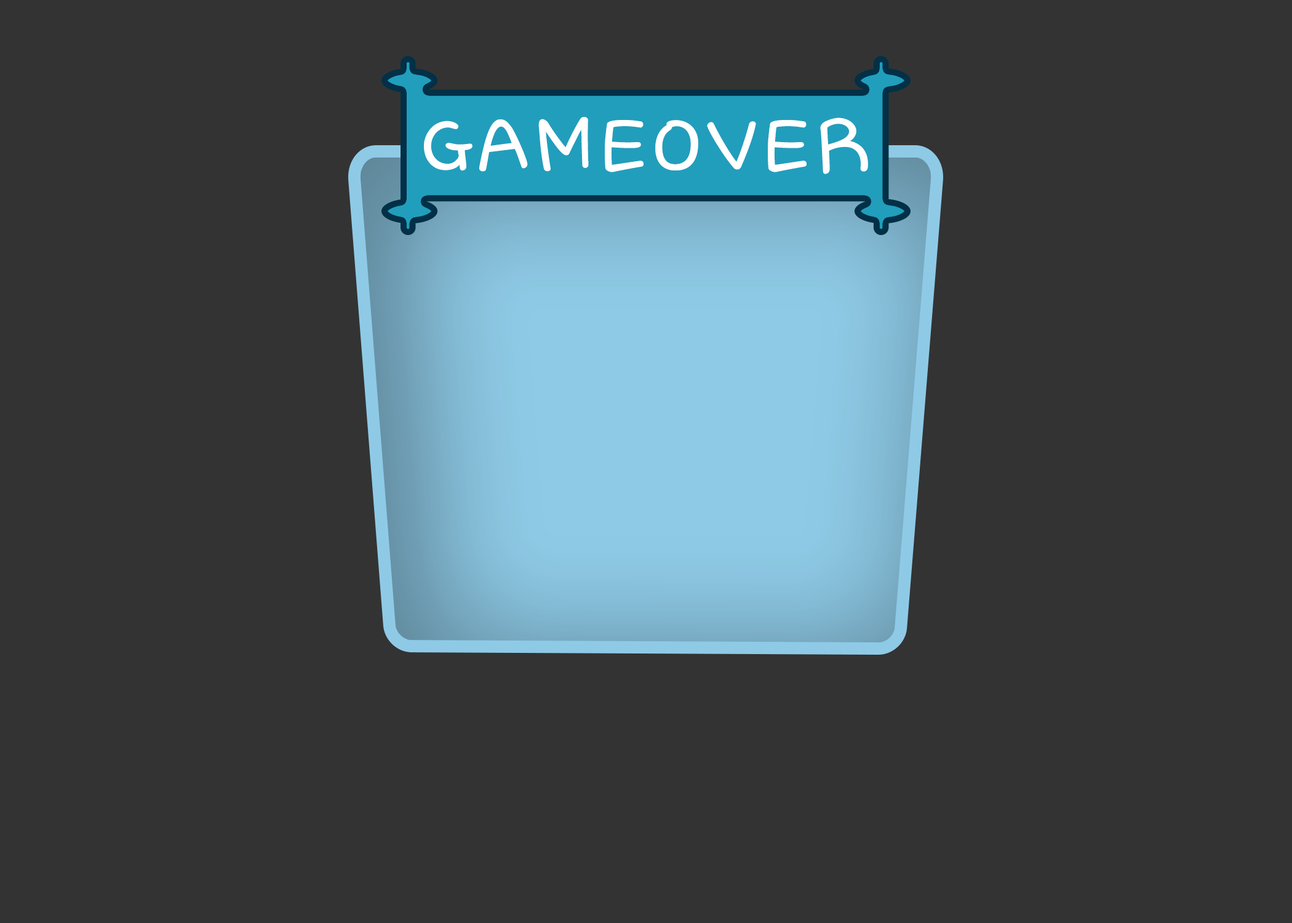
<style>
.page{position:relative;width:1292px;height:923px;background:#333333}
.page>*{position:absolute;margin:0}
.t1{font:76.9px "Chococooky";letter-spacing:0.06em;color:#ffffff;scale:1.13 1}
</style>
<div class="page">
<p class="t1" style="left:424px;top:117px;width:444px;height:57px">GAMEOVER</p>
</div>
